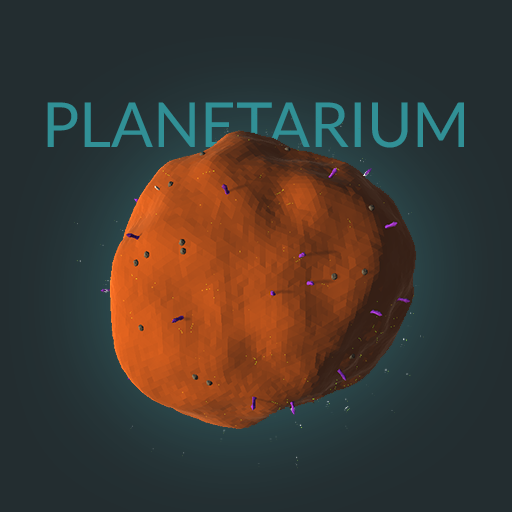
<style>
.page{position:relative;width:512px;height:512px;background:#232d30}
.page>*{position:absolute;margin:0}
.t1{font:62px "Lato-Regular";color:#319096}
</style>
<div class="page">
<p class="t1" style="left:47px;top:102px;width:417px;height:46px">PLANETARIUM</p>
</div>
